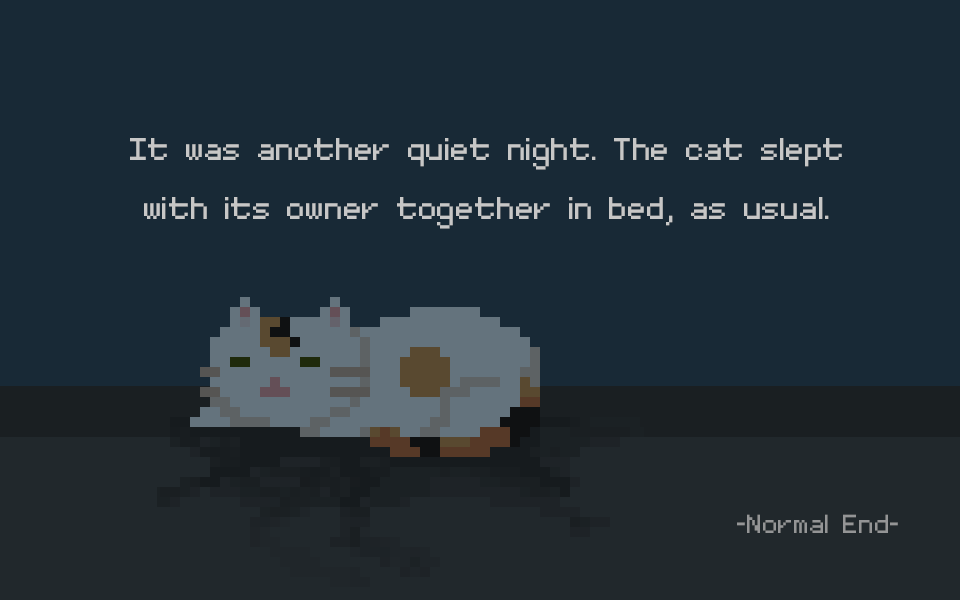
<style>
.page{position:relative;width:960px;height:600px;background:#182936}
.page>*{position:absolute;margin:0}
.t1{font:50px/58.3px "MinimalFont5x7";color:#c7c7c7}
.t2{font:41.7px "MinimalFont5x7";color:#949596}
</style>
<div class="page">
<p class="t1" style="left:130px;top:138px;width:712px;height:91px;text-align:center">It was another quiet night. The cat slept <br>with its owner together in bed, as usual.</p>
<p class="t2" style="left:737px;top:514px;width:161px;height:19px">-Normal End-</p>
</div>
